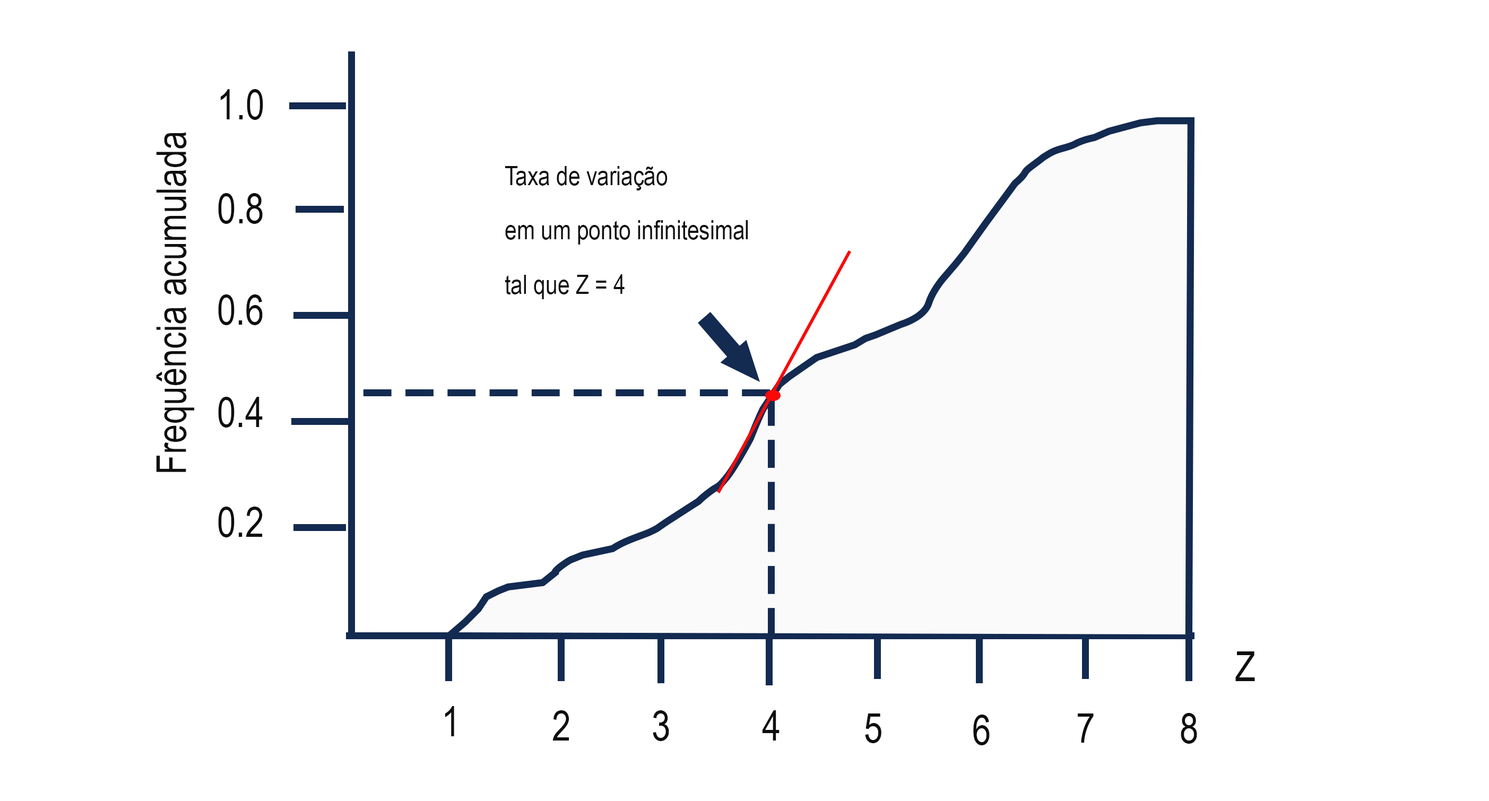
<style>
.page{position:relative;width:1489px;height:801px;background:#ffffff}
.page>*{position:absolute;margin:0}
.t1{font:70.7px "ArialNarrow";color:#0d0f0d}
.t2{font:45.1px "ArialNarrow";color:#0d0f0d}
</style>
<div class="page">
<p class="t1" style="left:220px;top:89px;width:43px;height:31px">1.0</p>
<p class="t1" style="left:156px;top:132px;width:38px;height:340px;rotate:-90deg">Frequência acumulada</p>
<p class="t2" style="left:505px;top:166px;width:243px;height:133px">Taxa de variação <br>em um ponto infinitesimal <br>tal que Z = 4</p>
<p class="t1" style="left:218px;top:193px;width:45px;height:31px">0.8</p>
<p class="t1" style="left:218px;top:294px;width:45px;height:31px">0.6</p>
<p class="t1" style="left:218px;top:397px;width:45px;height:31px">0.4</p>
<p class="t1" style="left:218px;top:507px;width:45px;height:30px">0.2</p>
<p class="t1" style="left:1235px;top:651px;width:20px;height:30px">Z</p>
<p class="t1" style="left:445px;top:706px;width:9px;height:30px">1</p>
<p class="t1" style="left:552px;top:710px;width:17px;height:31px">2</p>
<p class="t1" style="left:653px;top:710px;width:16px;height:31px">3</p>
<p class="t1" style="left:762px;top:710px;width:17px;height:31px">4</p>
<p class="t1" style="left:865px;top:714px;width:16px;height:29px">5</p>
<p class="t1" style="left:1077px;top:714px;width:16px;height:29px">7</p>
<p class="t1" style="left:1180px;top:713px;width:17px;height:31px">8</p>
<p class="t1" style="left:973px;top:715px;width:16px;height:30px">6</p>
</div>
